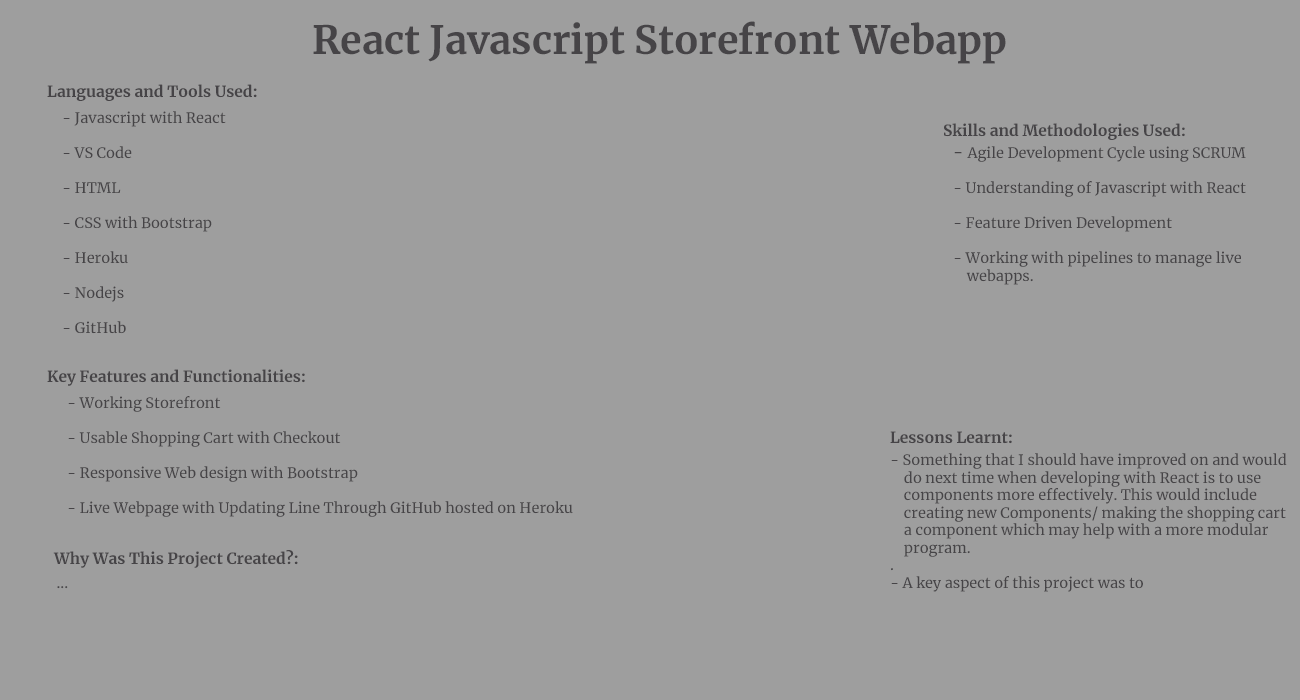
<style>
.page{position:relative;width:1300px;height:700px;background:#9e9e9e}
.page>*{position:absolute;margin:0}
.t1{font:39.2px "Merriweather-Bold";color:#464447}
.t2{font:15.5px "Merriweather-Bold";color:#464447}
.t3{font:14.6px "Merriweather-Regular";color:#464447}
.t4{font:16.7px "Merriweather-Regular";color:#464447}
</style>
<div class="page">
<p class="t1" style="left:313px;top:21px;width:693px;height:43px">React Javascript Storefront Webapp</p>
<p class="t2" style="left:47px;top:84px;width:210px;height:17px">Languages and Tools Used:</p>
<p class="t3" style="left:63px;top:111px;width:163px;height:223px">- Javascript with React<br><br>- VS Code<br><br>- HTML<br><br>- CSS with Bootstrap<br><br>- Heroku<br><br>- Nodejs<br><br>- GitHub</p>
<p class="t2" style="left:944px;top:123px;width:241px;height:17px">Skills and Methodologies Used:</p>
<p class="t3" style="left:954px;top:146px;width:292px;height:139px"><span class="t4">- </span>Agile Development Cycle using SCRUM<br><br>- Understanding of Javascript with React<br><br>- Feature Driven Development<br><br>- Working with pipelines to manage live <br>    webapps.</p>
<p class="t2" style="left:47px;top:369px;width:258px;height:17px">Key Features and Functionalities:</p>
<p class="t3" style="left:68px;top:396px;width:505px;height:121px">- Working Storefront<br><br>- Usable Shopping Cart with Checkout<br><br>- Responsive Web design with Bootstrap<br><br>- Live Webpage with Updating Line Through GitHub hosted on Heroku</p>
<p class="t2" style="left:890px;top:431px;width:122px;height:13px">Lessons Learnt:</p>
<p class="t3" style="left:891px;top:453px;width:396px;height:139px">- Something that I should have improved on and would<br>    do next time when developing with React is to use<br>    components more effectively. This would include<br>    creating new Components/ making the shopping cart<br>    a component which may help with a more modular <br>    program.<br>.<br>- A key aspect of this project was to</p>
<p class="t2" style="left:53px;top:550px;width:245px;height:18px">Why Was This Project Created?:</p>
<p class="t3" style="left:57px;top:586px;width:11px;height:3px">...</p>
</div>
